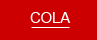
<style>
.page{position:relative;width:97px;height:40px;background:#cc0000}
.page>*{position:absolute;margin:0}
.t1{font:14.7px "ArialMT";color:#ffffff}
</style>
<div class="page">
<p class="t1" style="left:30px;top:12px;width:41px;height:11px">COLA</p>
</div>
